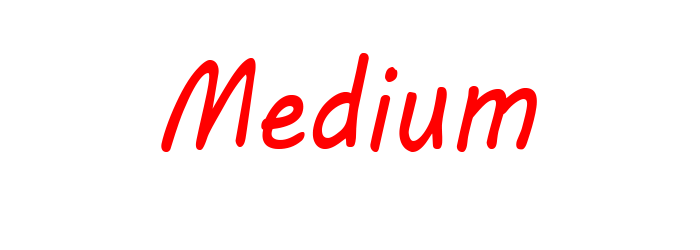
<style>
.page{position:relative;width:700px;height:250px;background:#ffffff}
.page>*{position:absolute;margin:0}
.t1{font:125px "MVBoli";color:#ff0000;scale:0.84 1}
</style>
<div class="page">
<p class="t1" style="left:161px;top:53px;width:376px;height:99px">Medium</p>
</div>
